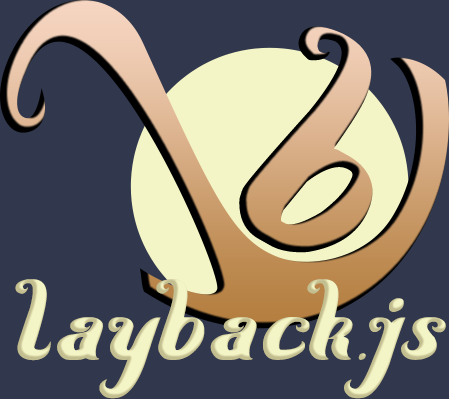
<style>
.page{position:relative;width:449px;height:399px;background:#31384d}
.page>*{position:absolute;margin:0}
.t1{font:374.1px "HereComesTheSun"}
.t2{font:136.1px "HereComesTheSun"}
</style>
<div class="page">
<p class="t1" style="left:239px;top:26px;width:134px;height:227px;rotate:29deg">b</p>
<p class="t2" style="left:15px;top:279px;width:431px;height:120px">layback.js</p>
</div>
